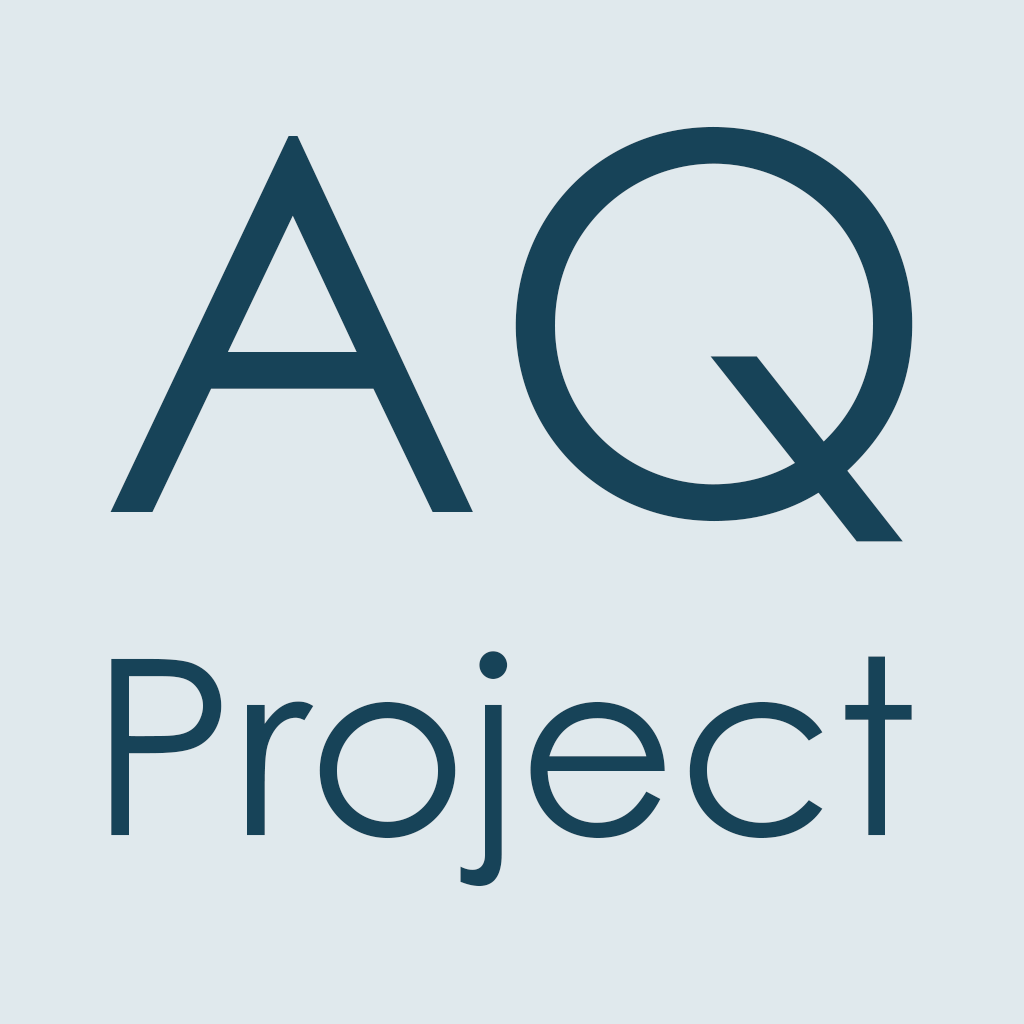
<style>
.page{position:relative;width:1024px;height:1024px;background:#e0e9ed}
.page>*{position:absolute;margin:0}
.t1{font:244.9px "CenturyGothicPro";color:#174358}
</style>
<div class="page">
<p class="t1" style="left:110px;top:126px;width:803px;height:761px;text-align:center">AQ<br>Project</p>
</div>
